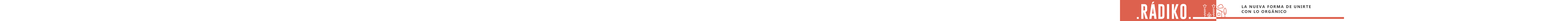
<style>
.page{position:relative;width:1568px;height:21px;background:#ffffff}
.page>*{position:absolute;margin:0}
.t1{font:15.2px "Gobold";letter-spacing:0.05em;color:#ffffff;text-transform:uppercase}
.t2{font:3.9px/4.8px "Ebrima-Bold";letter-spacing:0.15em;color:#333333;text-transform:uppercase}
</style>
<div class="page">
<p class="t1" style="left:1141px;top:2px;width:46px;height:17px">rádiko</p>
<p class="t2" style="left:1242px;top:5px;width:69px;height:8px">la nueva forma de unirte con lo orgánico</p>
</div>
